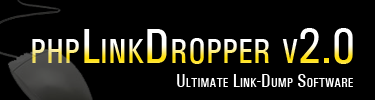
<style>
.page{position:relative;width:375px;height:100px;background:#000000}
.page>*{position:absolute;margin:0}
.t1{font:50px "UtahCondensed";font-variant:small-caps}
.t2{font:19px "UtahCondensed";color:#ffffff;font-variant:small-caps}
</style>
<div class="page">
<p class="t1" style="left:32px;top:28px;width:321px;height:36px">phpLinkDropper v2.0</p>
<p class="t2" style="left:177px;top:74px;width:176px;height:13px">Ultimate Link-Dump Software</p>
</div>
